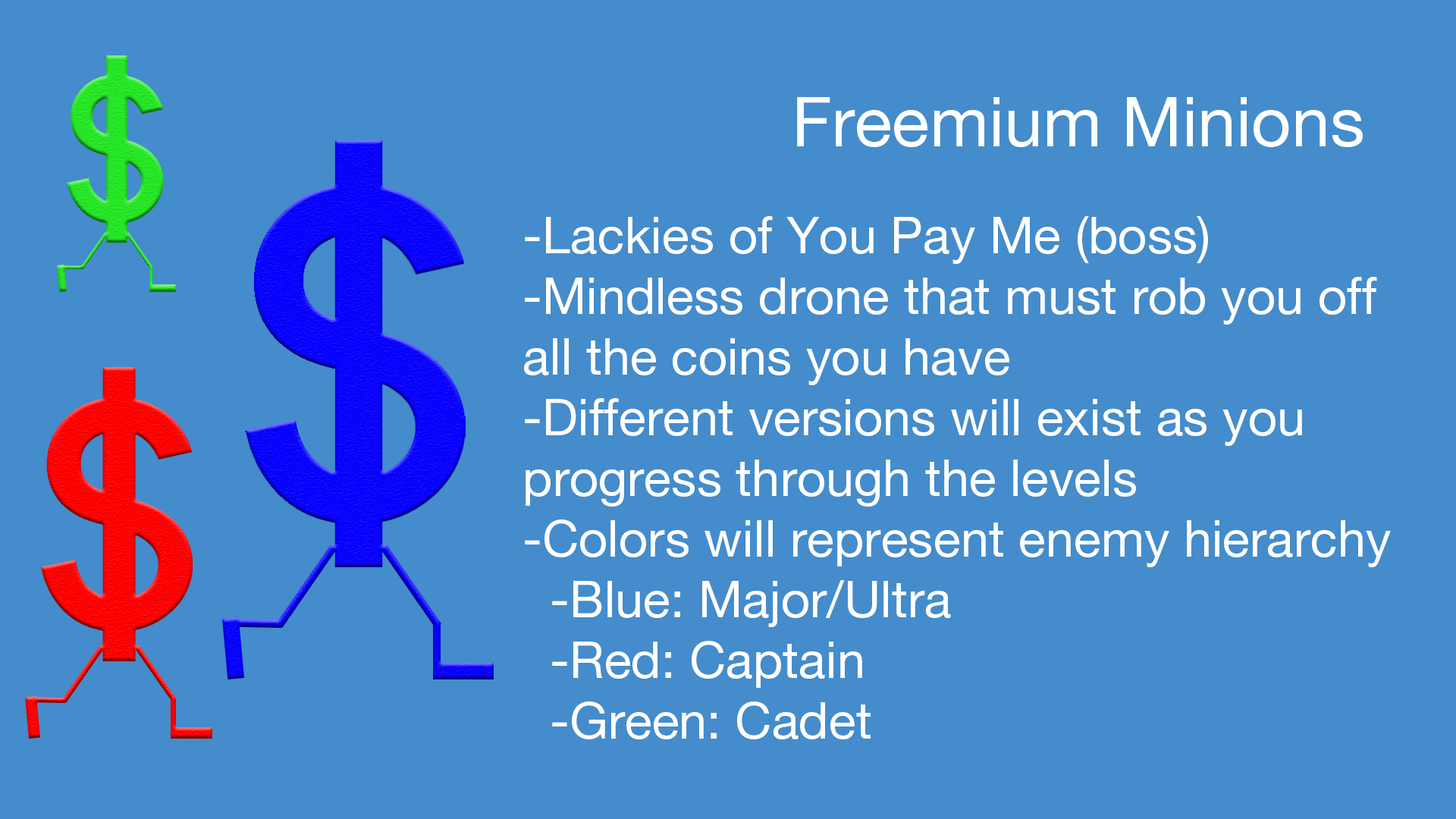
<style>
.page{position:relative;width:1456px;height:819px;background:#448ccb}
.page>*{position:absolute;margin:0}
.t1{font:69.5px "HelveticaNeueLTPro-Roman";color:#feffff}
.t2{font:50.6px "HelveticaNeueLTPro-Roman";color:#ffffff}
</style>
<div class="page">
<p class="t1" style="left:797px;top:97px;width:566px;height:50px">Freemium Minions</p>
<p class="t2" style="left:524px;top:216px;width:867px;height:523px">-Lackies of You Pay Me (boss)<br>-Mindless drone that must rob you off all the coins you have<br>-Different versions will exist as you progress through the levels<br>-Colors will represent enemy hierarchy<br> -Blue: Major/Ultra<br> -Red: Captain<br> -Green: Cadet</p>
</div>
